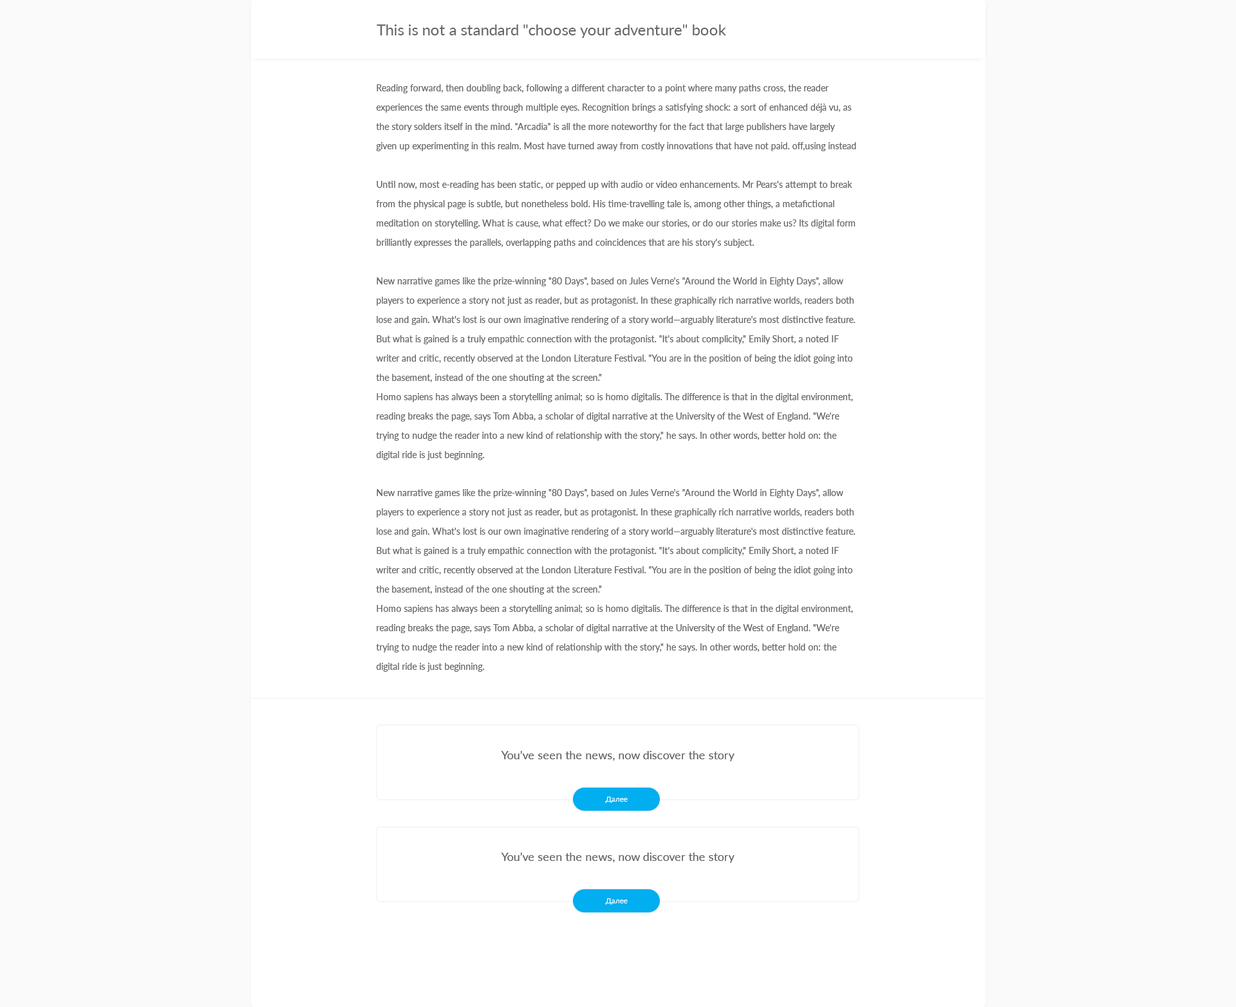
<style>
.page{position:relative;width:1236px;height:1007px;background:#ffffff}
.page>*{position:absolute;margin:0}
.t1{font:15.4px "Lato-Regular";color:#666666}
.t2{font:9px/19.3px "Lato-Regular";color:#666666}
.t3{font:11.6px "Lato-Regular";color:#666666}
.t4{font:7.7px "Lato-Regular";color:#ffffff}
</style>
<div class="page">
<p class="t1" style="left:377px;top:24px;width:349px;height:14px">This is not a standard "choose your adventure" book</p>
<p class="t2" style="left:376px;top:84px;width:480px;height:67px">Reading forward, then doubling back, following a different character to a point where many paths cross, the reader experiences the same events through multiple eyes. Recognition brings a satisfying shock: a sort of enhanced déjà vu, as the story solders itself in the mind. "Arcadia" is all the more noteworthy for the fact that large publishers have largely given up experimenting in this realm. Most have turned away from costly innovations that have not paid. off,using instead on using digital tools to support the broader reading ecosystem.</p>
<p class="t2" style="left:376px;top:181px;width:479px;height:491px">Until now, most e-reading has been static, or pepped up with audio or video enhancements. Mr Pears's attempt to break from the physical page is subtle, but nonetheless bold. His time-travelling tale is, among other things, a metafictional meditation on storytelling. What is cause, what effect? Do we make our stories, or do our stories make us? Its digital form brilliantly expresses the parallels, overlapping paths and coincidences that are his story's subject.<br><br>New narrative games like the prize-winning "80 Days", based on Jules Verne's "Around the World in Eighty Days", allow players to experience a story not just as reader, but as protagonist. In these graphically rich narrative worlds, readers both lose and gain. What's lost is our own imaginative rendering of a story world—arguably literature's most distinctive feature. But what is gained is a truly empathic connection with the protagonist. "It's about complicity," Emily Short, a noted IF writer and critic, recently observed at the London Literature Festival. "You are in the position of being the idiot going into the basement, instead of the one shouting at the screen."<br>Homo sapiens has always been a storytelling animal; so is homo digitalis. The difference is that in the digital environment, reading breaks the page, says Tom Abba, a scholar of digital narrative at the University of the West of England. "We're trying to nudge the reader into a new kind of relationship with the story," he says. In other words, better hold on: the digital ride is just beginning. <br><br>New narrative games like the prize-winning "80 Days", based on Jules Verne's "Around the World in Eighty Days", allow players to experience a story not just as reader, but as protagonist. In these graphically rich narrative worlds, readers both lose and gain. What's lost is our own imaginative rendering of a story world—arguably literature's most distinctive feature. But what is gained is a truly empathic connection with the protagonist. "It's about complicity," Emily Short, a noted IF writer and critic, recently observed at the London Literature Festival. "You are in the position of being the idiot going into the basement, instead of the one shouting at the screen."<br>Homo sapiens has always been a storytelling animal; so is homo digitalis. The difference is that in the digital environment, reading breaks the page, says Tom Abba, a scholar of digital narrative at the University of the West of England. "We're trying to nudge the reader into a new kind of relationship with the story," he says. In other words, better hold on: the digital ride is just beginning.</p>
<p class="t3" style="left:501px;top:750px;width:233px;height:11px">You’ve seen the news, now discover the story</p>
<p class="t4" style="left:605px;top:797px;width:23px;height:6px">Далее</p>
<p class="t3" style="left:501px;top:852px;width:233px;height:11px">You’ve seen the news, now discover the story</p>
<p class="t4" style="left:605px;top:898px;width:23px;height:7px">Далее</p>
</div>
